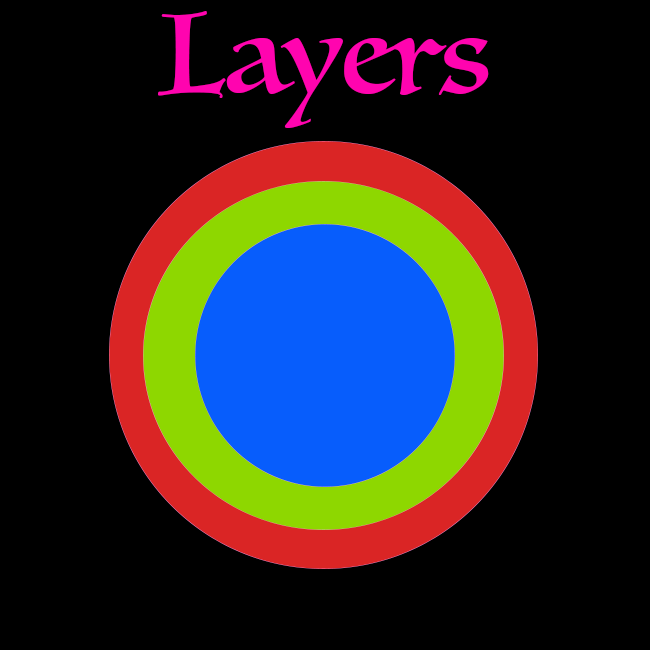
<style>
.page{position:relative;width:650px;height:650px;background:#000000}
.page>*{position:absolute;margin:0}
.t1{font:110px "Luminari-Regular";color:#ff04af}
</style>
<div class="page">
<p class="t1" style="left:158px;top:11px;width:331px;height:117px">Layers</p>
</div>
